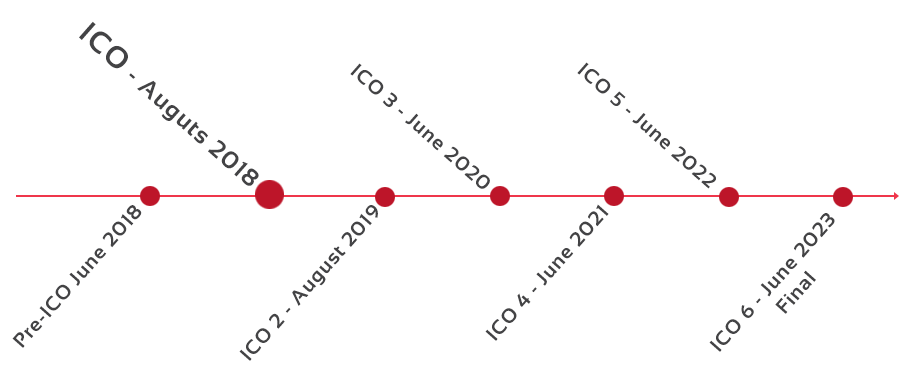
<style>
.page{position:relative;width:908px;height:372px;background:#ffffff}
.page>*{position:absolute;margin:0}
.t1{font:24px "Sansation-Bold";letter-spacing:0.05em;color:#434345}
.t2{font:30px "Sansation-Bold";letter-spacing:0.05em;color:#434345}
.t3{font:20px "Sansation-Bold";letter-spacing:0.05em;color:#434345}
</style>
<div class="page">
<p class="t1" style="left:79px;top:21px;width:180px;height:165px;rotate:41deg"><span class="t2">ICO</span> - Auguts 2018</p>
<p class="t3" style="left:350px;top:63px;width:140px;height:126px;rotate:41deg">ICO 3 - June 2020</p>
<p class="t3" style="left:577px;top:62px;width:139px;height:127px;rotate:41deg">ICO 5 - June 2022</p>
<p class="t3" style="left:12px;top:205px;width:130px;height:143px;rotate:-48deg">Pre-ICO June 2018</p>
<p class="t3" style="left:239px;top:205px;width:139px;height:156px;rotate:-48deg">ICO 2 - August 2019</p>
<p class="t3" style="left:485px;top:204px;width:124px;height:137px;rotate:-48deg">ICO 4 - June 2021</p>
<p class="t3" style="left:709px;top:213px;width:126px;height:139px;rotate:-48deg">ICO 6 - June 2023<br>  Final</p>
</div>
